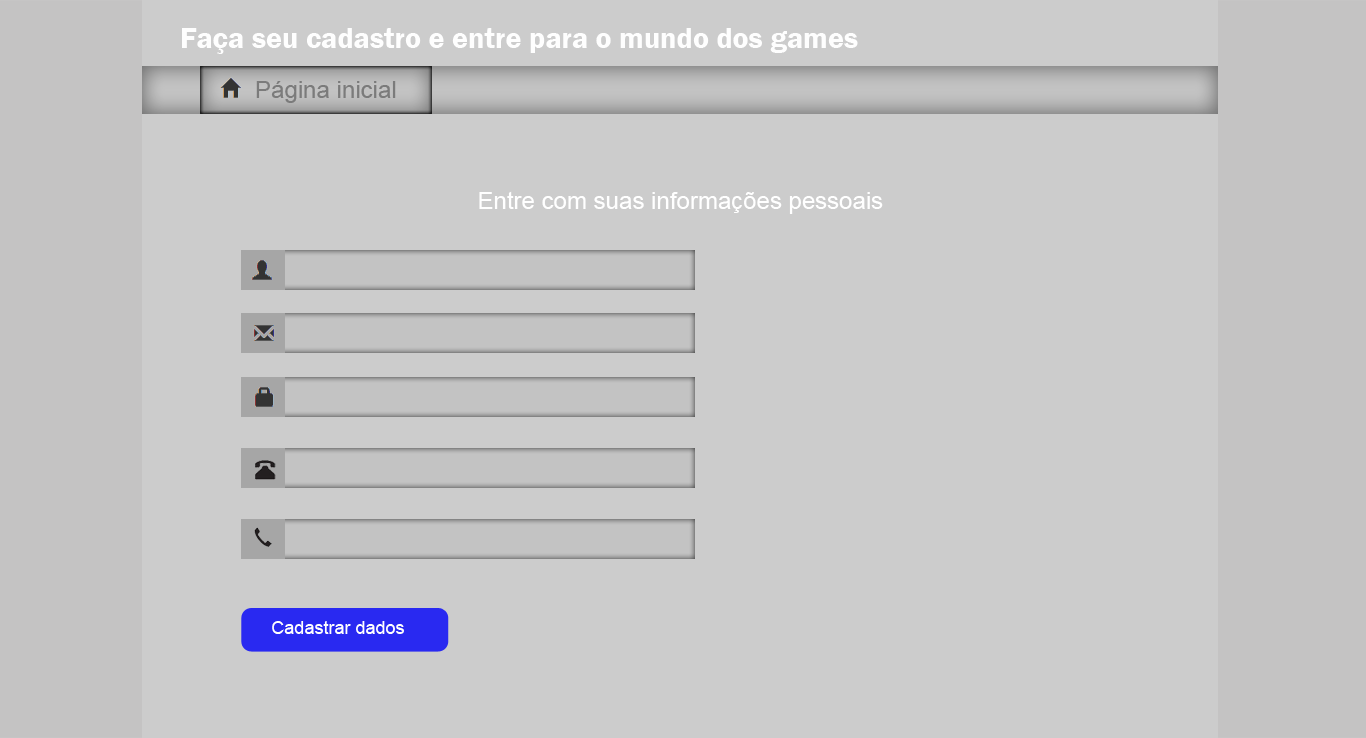
<style>
.page{position:relative;width:1366px;height:738px;background:#cccccc}
.page>*{position:absolute;margin:0}
.t1{font:30px "FranklinGothic-Demi";color:#fefefe}
.t2{font:24px "ArialMT";color:#7b7b7b}
.t3{font:24px "ArialMT";color:#ffffff}
.t4{font:18px "ArialMT";color:#ffffff}
</style>
<div class="page">
<p class="t1" style="left:182px;top:28px;width:676px;height:26px">Faça seu cadastro e entre para o mundo dos games</p>
<p class="t2" style="left:256px;top:81px;width:140px;height:22px">Página inicial</p>
<p class="t3" style="left:479px;top:191px;width:404px;height:23px">Entre com suas informações pessoais</p>
<p class="t4" style="left:272px;top:621px;width:132px;height:13px">Cadastrar dados</p>
</div>
